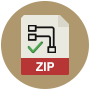
<style>
.page{position:relative;width:90px;height:90px;background:#af986d}
.page>*{position:absolute;margin:0}
.t1{font:12px "Arial-BoldMT";color:#ffffff}
</style>
<div class="page">
<p class="t1" style="left:36px;top:62px;width:18px;height:9px">ZIP</p>
</div>
